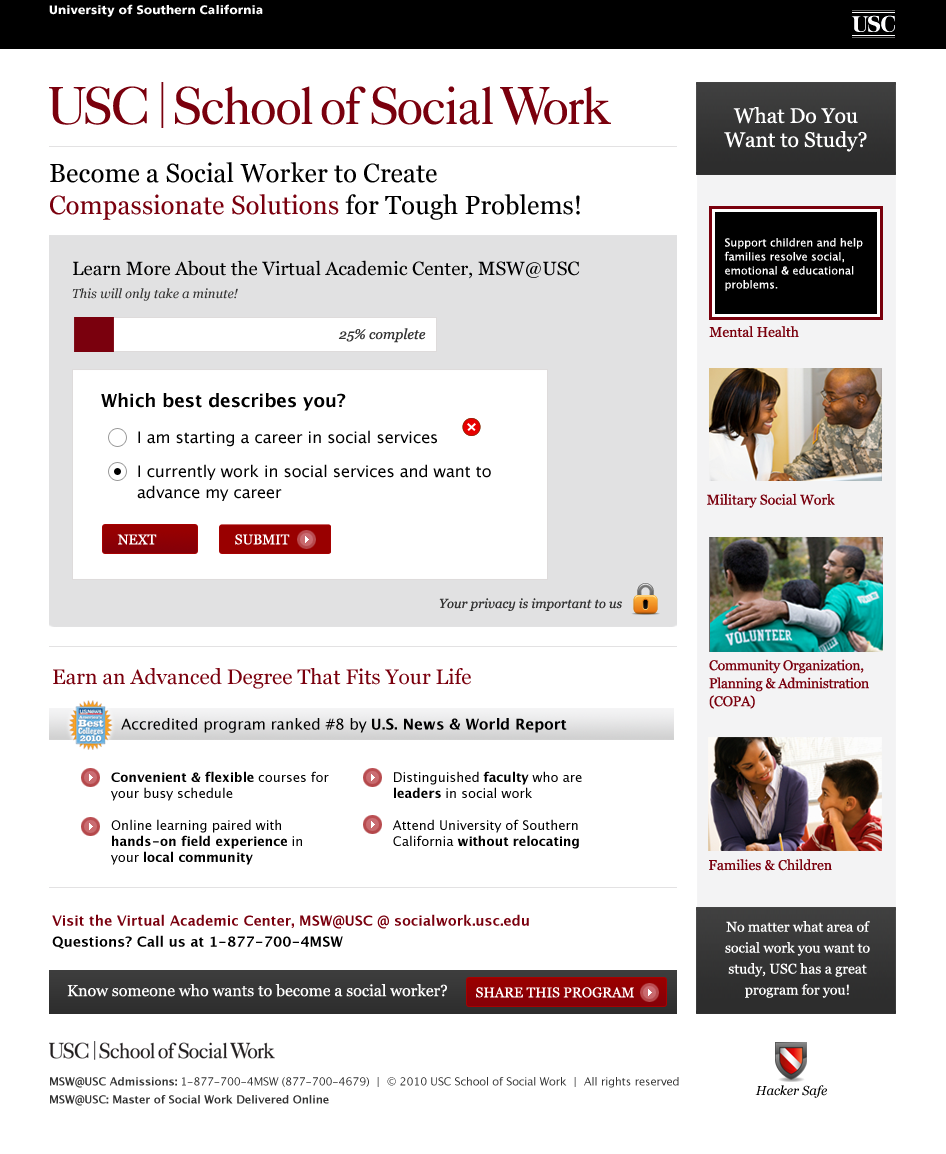
<style>
.page{position:relative;width:946px;height:1154px;background:#ffffff}
.page>*{position:absolute;margin:0}
.t1{font:21px/24px "Georgia";color:#ffffff}
.t2{font:26px/32px "Georgia";color:#000000}
.t3{font:26px/32px "Georgia";color:#7a000e}
.t4{font:11px/14px "LucidaGrande";color:#ffffff}
.t5{font:19px/21px "Georgia";color:#000000}
.t6{font:13px/23px "Georgia-Italic";color:#333333}
.t7{font:14px "Georgia-Italic";color:#333333}
.t8{font:14px "Georgia";color:#7a000d}
.t9{font:16px/28px "LucidaGrande";color:#000000}
.t10{font:18px/24px "LucidaGrande-Bold";color:#000000}
.t11{font:16px/24px "LucidaGrande";color:#000000}
.t12{font:16px/21px "LucidaGrande";color:#000000}
.t13{font:14px "Georgia";color:#ffffff;text-transform:uppercase}
.t14{font:13px "Georgia-Italic";color:#333333}
.t15{font:14px/18px "Georgia";letter-spacing:-0.02em;color:#7a000d}
.t16{font:21px "Georgia";color:#7a000d}
.t17{font:15px "LucidaGrande";color:#000000}
.t18{font:15px "LucidaGrande-Bold";color:#000000}
.t19{font:13px/16px "LucidaGrande";color:#000000}
.t20{font:13px/16px "LucidaGrande-Bold";color:#000000}
.t21{font:14px/21px "LucidaGrande-Bold";color:#7a000e}
.t22{font:14px/21px "LucidaGrande-Bold";color:#000000}
.t23{font:14px/21px "Georgia";color:#ffffff}
.t24{font:16px "Georgia";color:#ffffff}
.t25{font:11px/24px "LucidaGrande";letter-spacing:-0.01em;color:#333333}
.t26{font:13px/14px "LucidaGrande-Bold";letter-spacing:-0.01em;color:#333333}
.t27{font:11px/24px "LucidaGrande-Bold";letter-spacing:-0.01em;color:#333333}
.t28{font:11px/18px "LucidaGrande-Bold";letter-spacing:-0.01em;color:#333333}
.t29{font:13px "Georgia-Italic";color:#000000}
</style>
<div class="page">
<p class="t1" style="left:724px;top:107px;width:143px;height:45px;text-align:center">What Do You<br>Want to Study?</p>
<p class="t2" style="left:50px;top:162px;width:530px;height:58px">Become a Social Worker to Create  <br><span class="t3">Compassionate Solutions </span>for Tough Problems!</p>
<p class="t4" style="left:724px;top:238px;width:139px;height:53px">Support children and help families resolve social, emotional &amp; educational problems.</p>
<p class="t5" style="left:72px;top:260px;width:508px;height:41px">Learn More About the Virtual Academic Center, MSW@USC<br><span class="t6">This will only take a minute!</span></p>
<p class="t7" style="left:338px;top:328px;width:88px;height:15px">25% complete</p>
<p class="t8" style="left:709px;top:326px;width:90px;height:12px">Mental Health</p>
<p class="t9" style="left:101px;top:393px;width:390px;height:108px"><span class="t10">Which best describes you?<br><br></span><span class="t11"> I am starting a career in social services<br><br></span> I currently work in social services and want to<br><span class="t12">advance my career</span></p>
<p class="t8" style="left:707px;top:493px;width:128px;height:15px">Military Social Work</p>
<p class="t13" style="left:117px;top:534px;width:40px;height:11px">next</p>
<p class="t13" style="left:235px;top:534px;width:55px;height:11px">SUBMIT</p>
<p class="t14" style="left:439px;top:598px;width:183px;height:13px">Your privacy is important to us</p>
<p class="t15" style="left:709px;top:659px;width:160px;height:50px">Community Organization,<br>Planning &amp; Administration <br>(COPA)</p>
<p class="t16" style="left:53px;top:668px;width:418px;height:21px">Earn an Advanced Degree That Fits Your Life</p>
<p class="t17" style="left:121px;top:718px;width:446px;height:15px">Accredited program ranked #8 by <span class="t18">U.S. News &amp; World Report</span></p>
<p class="t19" style="left:111px;top:771px;width:218px;height:94px"><span class="t20">Convenient &amp; flexible </span>courses for your busy schedule<br><br>Online learning paired with <span class="t20">hands-on field experience </span>in your <span class="t20">local community</span></p>
<p class="t19" style="left:392px;top:771px;width:190px;height:78px">Distinguished <span class="t20">faculty </span>who are <span class="t20">leaders </span>in social work<br><br>Attend University of Southern California <span class="t20">without relocating</span></p>
<p class="t8" style="left:709px;top:859px;width:123px;height:12px">Families &amp; Children</p>
<p class="t21" style="left:52px;top:914px;width:477px;height:35px">Visit the Virtual Academic Center, MSW@USC @ socialwork.usc.edu<br><span class="t22">Questions? Call us at 1-877-700-4MSW</span></p>
<p class="t23" style="left:725px;top:921px;width:145px;height:77px;text-align:center">No matter what area of social work you want to study, USC has a great<br>program for you!</p>
<p class="t24" style="left:67px;top:984px;width:380px;height:13px">Know someone who wants to become a social worker?</p>
<p class="t13" style="left:476px;top:987px;width:158px;height:11px">Share this program</p>
<p class="t25" style="left:50px;top:1077px;width:629px;height:29px"><span class="t26"><br><br></span><span class="t27">MSW@USC Admissions: </span>1-877-700-4MSW (877-700-4679)  |  © 2010 USC School of Social Work  |  All rights reserved<br><span class="t28">MSW@USC: Master of Social Work Delivered Online</span></p>
<p class="t29" style="left:755px;top:1085px;width:72px;height:13px">Hacker Safe</p>
</div>
